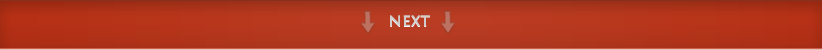
<style>
.page{position:relative;width:822px;height:50px}
.page>*{position:absolute;margin:0}
.t1{font:20.2px "FontinSans-SmallCaps";letter-spacing:-0.01em;color:#cccccc}
</style>
<div class="page">
<p class="t1" style="left:390px;top:15px;width:40px;height:11px">next</p>
</div>
